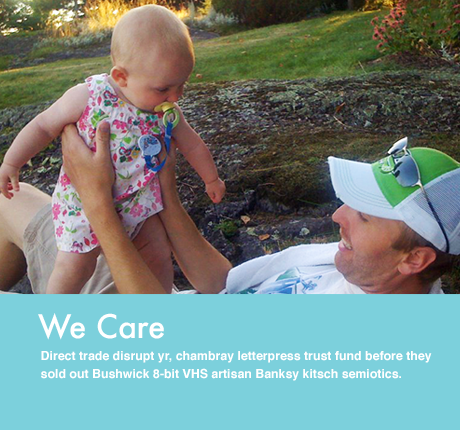
<style>
.page{position:relative;width:460px;height:430px;background:#7cd0dc}
.page>*{position:absolute;margin:0}
.t1{font:31.5px "Futura-Medium";letter-spacing:-0.005em;color:#ffffff}
.t2{font:12.3px/18px "Helvetica-Bold";color:#ffffff}
</style>
<div class="page">
<p class="t1" style="left:38px;top:313px;width:126px;height:27px">We Care</p>
<p class="t2" style="left:41px;top:351px;width:391px;height:30px">Direct trade disrupt yr, chambray letterpress trust fund before they sold out Bushwick 8-bit VHS artisan Banksy kitsch semiotics.</p>
</div>
